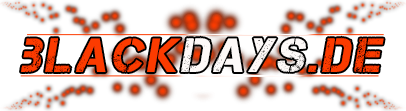
<style>
.page{position:relative;width:406px;height:111px;background:#ffffff}
.page>*{position:absolute;margin:0}
.t1{font:48px "Captureit";letter-spacing:0.1em;color:#fc3b00;font-style:italic;scale:0.97 1}
.t2{font:48px "Captureit";letter-spacing:0.1em;color:#fdf9f8;font-style:italic;scale:0.97 1}
</style>
<div class="page">
<p class="t1" style="left:21px;top:37px;width:363px;height:35px">Black<span class="t2">days</span>.de</p>
</div>
